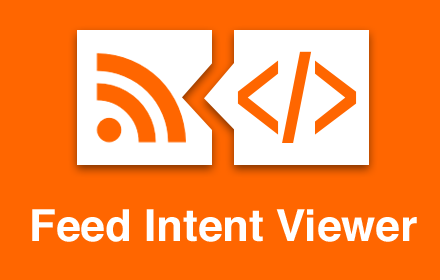
<style>
.page{position:relative;width:440px;height:280px;background:#ff6600}
.page>*{position:absolute;margin:0}
.t1{font:44px "Helvetica-Bold";color:#ffffff}
</style>
<div class="page">
<p class="t1" style="left:32px;top:209px;width:385px;height:33px">Feed Intent Viewer</p>
</div>
